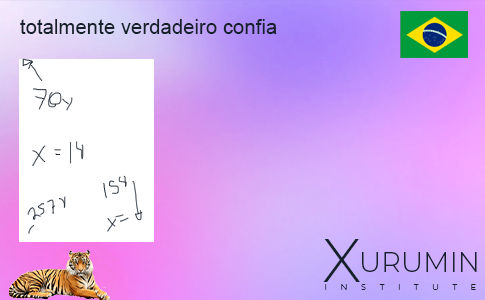
<style>
.page{position:relative;width:485px;height:300px}
.page>*{position:absolute;margin:0}
.t1{font:20.4px "ArialMT";color:#15202b}
.t2{font:60.9px "Montserrat-Light";color:#15202b}
.t3{font:27.8px "Montserrat-Light";color:#15202b;text-transform:uppercase}
.t4{font:8.3px "Montserrat-Light";letter-spacing:1.64em;color:#15202b;text-transform:uppercase}
</style>
<div class="page">
<p class="t1" style="left:20px;top:19px;width:257px;height:15px">totalmente verdadeiro confia</p>
<p class="t2" style="left:323px;top:239px;width:37px;height:43px">X</p>
<p class="t3" style="left:362px;top:252px;width:115px;height:20px">urumin</p>
<p class="t4" style="left:325px;top:284px;width:151px;height:6px">institute</p>
</div>
